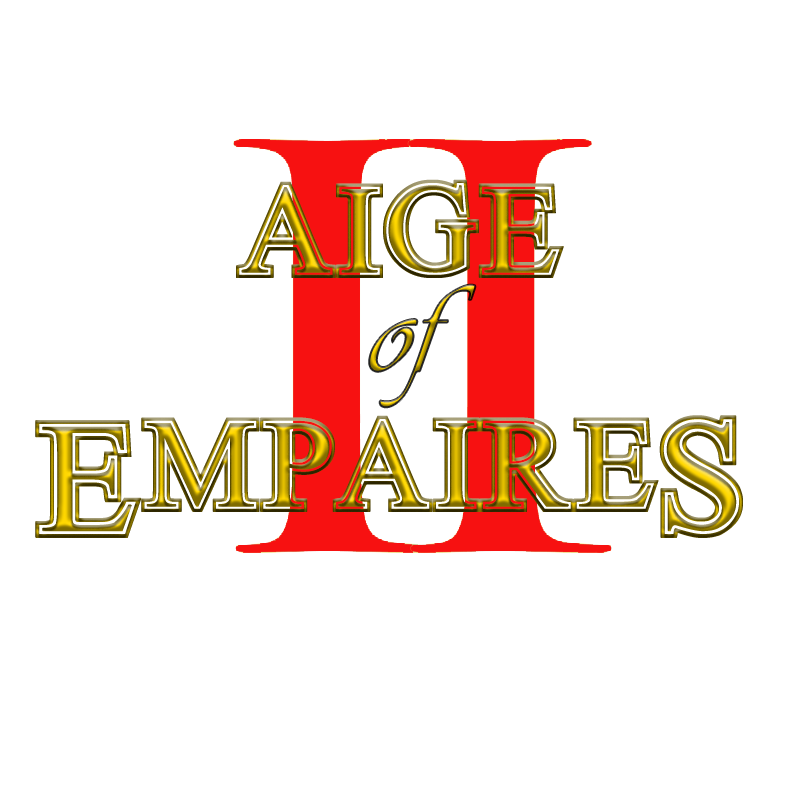
<style>
.page{position:relative;width:800px;height:800px;background:#ffffff}
.page>*{position:absolute;margin:0}
.t1{font:140px "GreekHouseSymbolized"}
.t2{font:130.2px "Vivaldii"}
.t3{font:174.7px "GreekHouseSymbolized"}
</style>
<div class="page">
<p class="t1" style="left:236px;top:179px;width:328px;height:99px">AIge</p>
<p class="t2" style="left:369px;top:284px;width:107px;height:124px">of</p>
<p class="t3" style="left:35px;top:420px;width:107px;height:118px">E</p>
<p class="t1" style="left:141px;top:415px;width:518px;height:97px">mpAIre</p>
<p class="t3" style="left:659px;top:415px;width:84px;height:123px">s</p>
</div>
